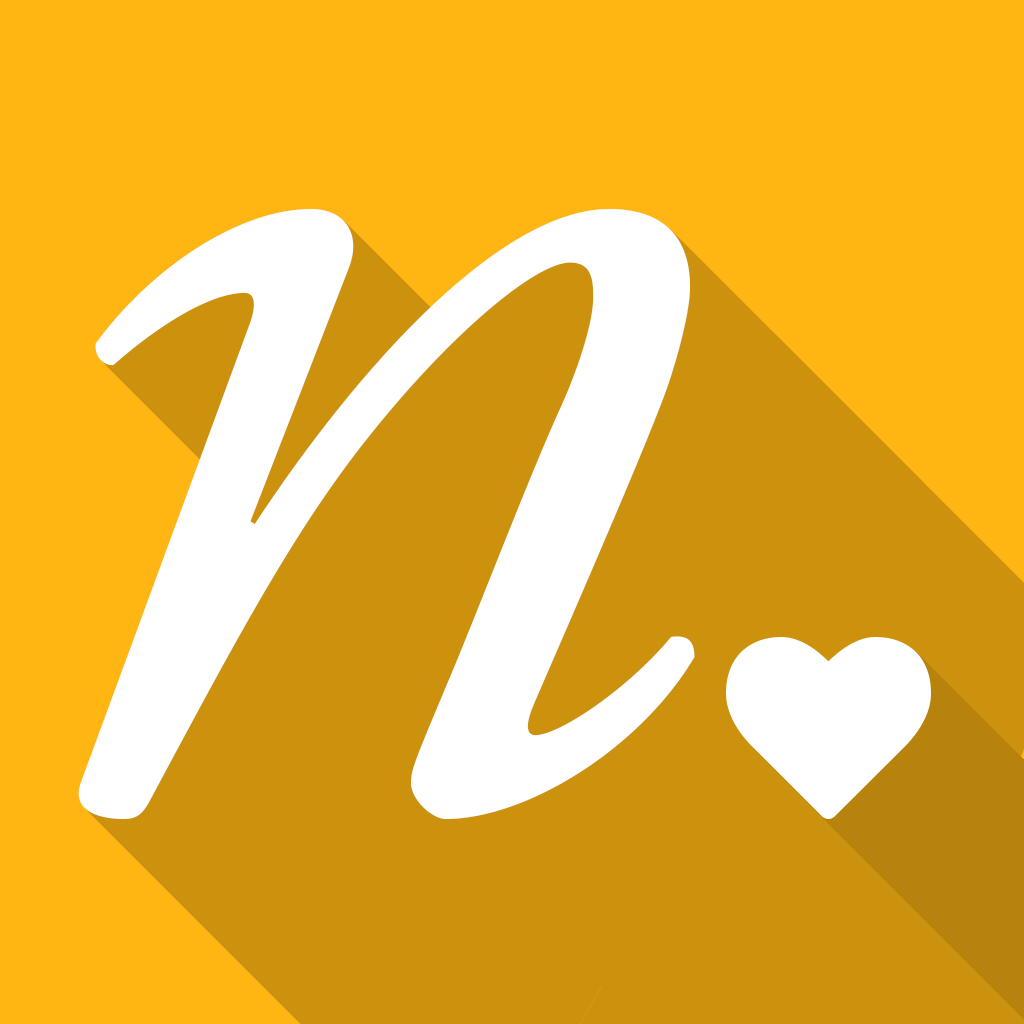
<style>
.page{position:relative;width:1024px;height:1024px;background:#ffb612}
.page>*{position:absolute;margin:0}
.t1{font:1445.8px "AGaramondPro-Italic";color:#ffffff}
</style>
<div class="page">
<p class="t1" style="left:78px;top:209px;width:617px;height:610px">n</p>
</div>
